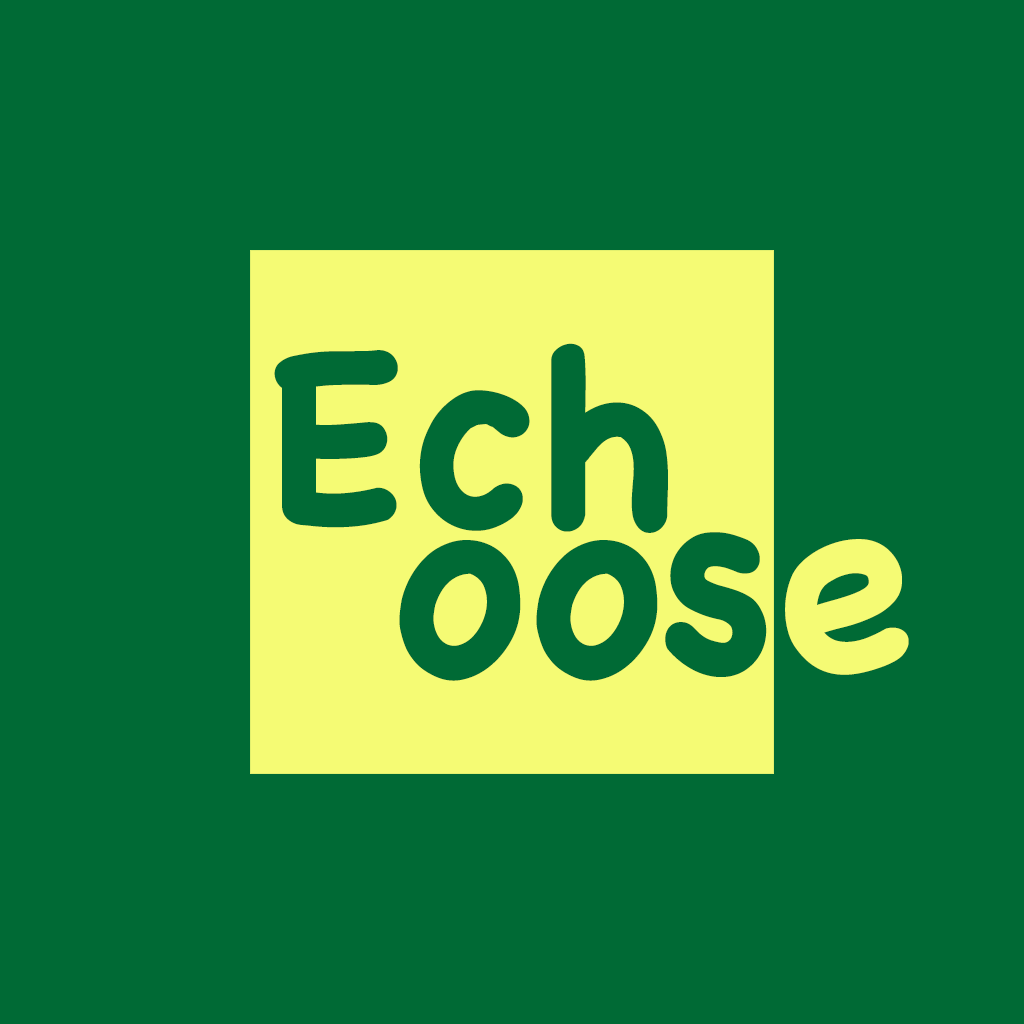
<style>
.page{position:relative;width:1024px;height:1024px;background:#006a35}
.page>*{position:absolute;margin:0}
.t1{font:250px "Chalkboard-Bold";color:#006a35}
.t2{font:250px "Chalkboard-Bold";color:#f5fb74}
</style>
<div class="page">
<p class="t1" style="left:274px;top:343px;width:394px;height:190px">Ech</p>
<p class="t1" style="left:399px;top:532px;width:510px;height:149px">oos<span class="t2">e</span></p>
</div>
